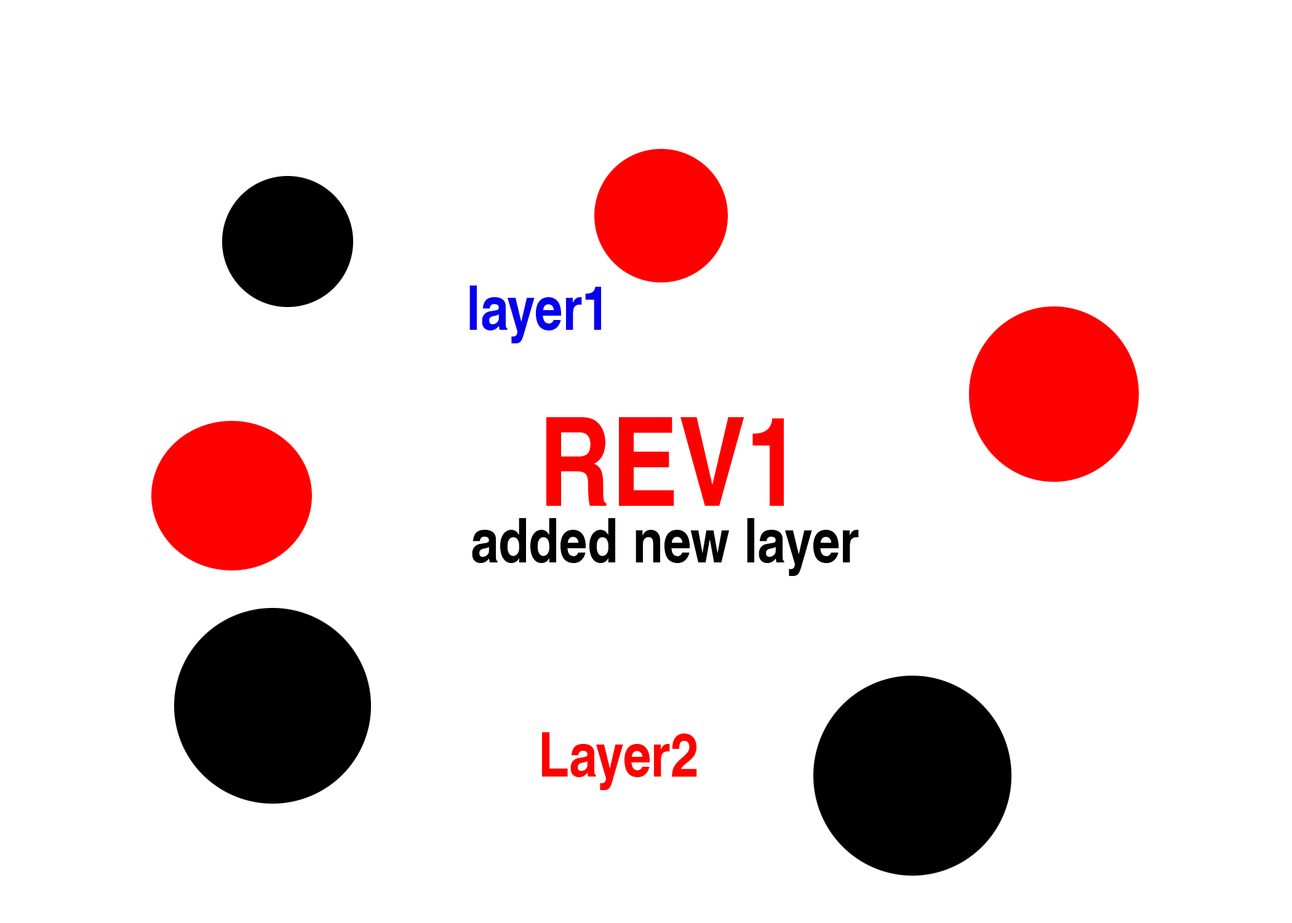
<style>
.page{position:relative;width:1292px;height:923px;background:#ffffff}
.page>*{position:absolute;margin:0}
.t1{font:61.5px "HelveticaCE-NarrowBold";color:#0700ec}
.t2{font:123.1px "HelveticaCE-NarrowBold";color:#ff0000}
.t3{font:61.5px "HelveticaCE-NarrowBold";color:#000000}
.t4{font:61.5px "HelveticaCE-NarrowBold";color:#ff0000}
</style>
<div class="page">
<p class="t1" style="left:469px;top:285px;width:132px;height:59px">layer1</p>
<p class="t2" style="left:546px;top:417px;width:238px;height:89px">REV1</p>
<p class="t3" style="left:472px;top:518px;width:387px;height:59px">added new layer</p>
<p class="t4" style="left:542px;top:732px;width:155px;height:59px">Layer2</p>
</div>
